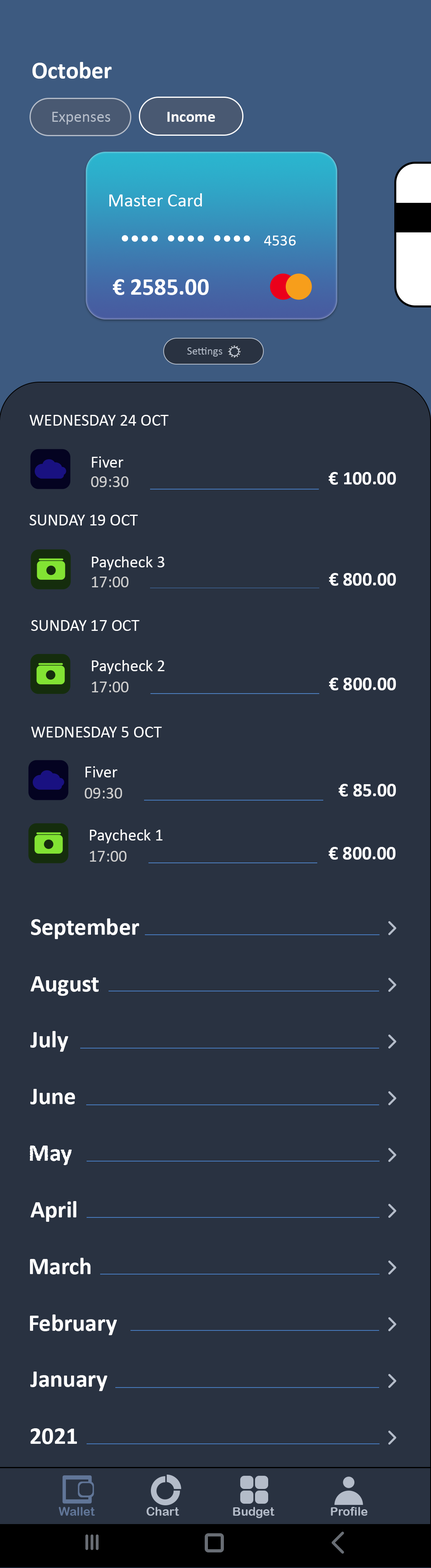
<style>
.page{position:relative;width:431px;height:1568px;background:#293241}
.page>*{position:absolute;margin:0}
.t1{font:24px "Calibri-Bold";color:#ffffff}
.t2{font:16px "Calibri";color:#b4bcc9}
.t3{font:16px "Calibri-Bold";color:#ffffff}
.t4{font:19.2px "Calibri";color:#ffffff}
.t5{font:16px "Calibri";color:#ffffff}
.t6{font:11.2px "Calibri";color:#b4bcc9}
.t7{font:16.8px "Calibri";color:#ffffff}
.t8{font:19.2px "Calibri-Bold";color:#ffffff}
.t9{font:16.8px "Calibri";color:#cfcfcf}
.t10{font:12px "ArialRoundedMTBold";color:#617698}
.t11{font:12px "ArialRoundedMTBold";color:#b4bcc9}
</style>
<div class="page">
<p class="t1" style="left:32px;top:62px;width:80px;height:17px">October</p>
<p class="t2" style="left:52px;top:112px;width:58px;height:13px">Expenses</p>
<p class="t3" style="left:167px;top:112px;width:48px;height:10px">Income</p>
<p class="t4" style="left:109px;top:193px;width:93px;height:13px">Master Card</p>
<p class="t5" style="left:264px;top:236px;width:32px;height:10px">4536</p>
<p class="t1" style="left:113px;top:279px;width:96px;height:16px">€ 2585.00</p>
<p class="t6" style="left:187px;top:347px;width:35px;height:10px">Settings</p>
<p class="t7" style="left:30px;top:415px;width:139px;height:11px">WEDNESDAY 24 OCT</p>
<p class="t7" style="left:92px;top:456px;width:31px;height:12px">Fiver</p>
<p class="t8" style="left:329px;top:472px;width:67px;height:13px">€ 100.00</p>
<p class="t9" style="left:91px;top:476px;width:38px;height:11px">09:30</p>
<p class="t7" style="left:30px;top:515px;width:108px;height:10px">SUNDAY 19 OCT</p>
<p class="t7" style="left:92px;top:556px;width:73px;height:14px">Paycheck 3</p>
<p class="t9" style="left:92px;top:577px;width:37px;height:10px">17:00</p>
<p class="t8" style="left:329px;top:573px;width:67px;height:13px">€ 800.00</p>
<p class="t7" style="left:31px;top:620px;width:109px;height:11px">SUNDAY 17 OCT</p>
<p class="t7" style="left:92px;top:660px;width:73px;height:14px">Paycheck 2</p>
<p class="t8" style="left:329px;top:678px;width:67px;height:12px">€ 800.00</p>
<p class="t9" style="left:92px;top:682px;width:37px;height:10px">17:00</p>
<p class="t7" style="left:31px;top:727px;width:131px;height:10px">WEDNESDAY 5 OCT</p>
<p class="t7" style="left:85px;top:766px;width:32px;height:11px">Fiver</p>
<p class="t8" style="left:339px;top:784px;width:57px;height:13px">€ 85.00</p>
<p class="t9" style="left:85px;top:788px;width:37px;height:11px">09:30</p>
<p class="t7" style="left:90px;top:829px;width:73px;height:14px">Paycheck 1</p>
<p class="t9" style="left:90px;top:851px;width:37px;height:11px">17:00</p>
<p class="t8" style="left:329px;top:847px;width:67px;height:13px">€ 800.00</p>
<p class="t1" style="left:31px;top:918px;width:108px;height:21px">September</p>
<p class="t1" style="left:30px;top:976px;width:69px;height:20px">August</p>
<p class="t1" style="left:30px;top:1031px;width:38px;height:21px">July</p>
<p class="t1" style="left:30px;top:1089px;width:45px;height:15px">June</p>
<p class="t1" style="left:30px;top:1146px;width:42px;height:19px">May</p>
<p class="t1" style="left:30px;top:1201px;width:47px;height:21px">April</p>
<p class="t1" style="left:30px;top:1258px;width:61px;height:17px">March</p>
<p class="t1" style="left:30px;top:1314px;width:87px;height:21px">February</p>
<p class="t1" style="left:30px;top:1372px;width:77px;height:19px">January</p>
<p class="t1" style="left:30px;top:1428px;width:47px;height:16px">2021</p>
<p class="t10" style="left:59px;top:1507px;width:36px;height:9px">Wallet</p>
<p class="t11" style="left:147px;top:1507px;width:32px;height:9px">Chart</p>
<p class="t11" style="left:233px;top:1507px;width:42px;height:11px">Budget</p>
<p class="t11" style="left:331px;top:1507px;width:37px;height:9px">Profile</p>
</div>
